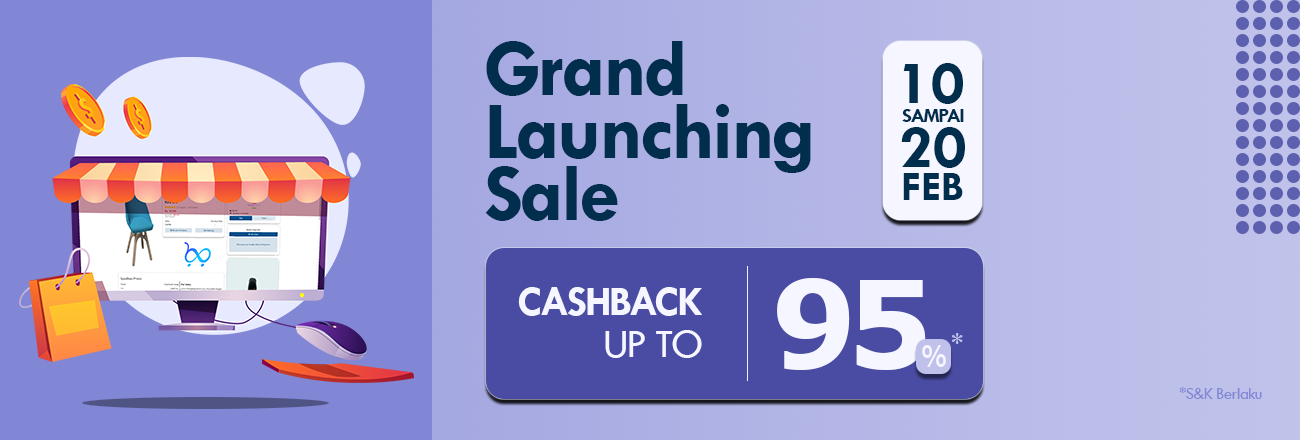
<style>
.page{position:relative;width:1300px;height:440px}
.page>*{position:absolute;margin:0}
.t1{font:83.3px/62.5px "TwCenMT-Bold";letter-spacing:-0.035em;color:#012e4d}
.t2{font:62.5px "TwCenMT-Bold";letter-spacing:0.02em;color:#012e4d}
.t3{font:20.8px "TwCenMT-Bold";letter-spacing:-0.07em;color:#012e4d}
.t4{font:41.7px "TwCenMT-Bold";color:#012e4d}
.t5{font:120.8px "Verdana-Bold";letter-spacing:-0.08em;color:#f5f6ff}
.t6{font:41.7px "TwCenMT-Bold";letter-spacing:-0.04em;color:#f5f6ff}
.t7{font:41.7px "TwCenMT-Regular";letter-spacing:-0.04em;color:#f5f6ff}
.t8{font:29.2px "TwCenMT-Bold";letter-spacing:-0.04em;color:#bfc1ea}
.t9{font:29.2px "TwCenMT-Bold";letter-spacing:-0.04em;color:#f5f6ff}
.t10{font:16.7px "TwCenMT-Regular";letter-spacing:-0.04em;color:#8186d5}
</style>
<div class="page">
<p class="t1" style="left:485px;top:41px;width:326px;height:180px">Grand <br>Launching<br>Sale</p>
<p class="t2" style="left:903px;top:63px;width:60px;height:41px">10</p>
<p class="t3" style="left:902px;top:109px;width:62px;height:13px">SAMPAI</p>
<p class="t2" style="left:901px;top:127px;width:64px;height:41px">20</p>
<p class="t4" style="left:903px;top:173px;width:60px;height:27px">FEB</p>
<p class="t5" style="left:777px;top:278px;width:149px;height:92px">95</p>
<p class="t6" style="left:518px;top:287px;width:184px;height:29px">CASHBACK</p>
<p class="t7" style="left:605px;top:330px;width:97px;height:28px">UP TO</p>
<p class="t8" style="left:952px;top:333px;width:11px;height:11px">*</p>
<p class="t9" style="left:922px;top:345px;width:24px;height:22px">%</p>
<p class="t10" style="left:1179px;top:387px;width:83px;height:12px">*S&amp;K Berlaku</p>
</div>
